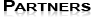
<style>
.page{position:relative;width:100px;height:17px;background:#ffffff}
.page>*{position:absolute;margin:0}
.t1{font:15px "Arial-BoldMT";color:#000000;scale:1.35 1}
.t2{font:11px "Arial-BoldMT";color:#000000;scale:1.44 1}
.t3{font:15px "Arial-BoldMT";color:#000000;scale:1.44 1}
</style>
<div class="page">
<p class="t1" style="left:4px;top:0px;width:11px;height:11px">P</p>
<p class="t2" style="left:14px;top:3px;width:77px;height:8px"><span class="t3"> </span>ARTNERS</p>
</div>
